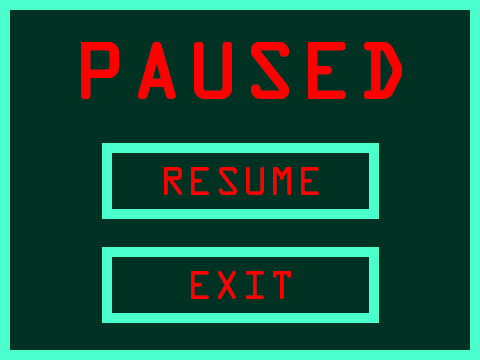
<style>
.page{position:relative;width:480px;height:360px;background:#003223}
.page>*{position:absolute;margin:0}
.t1{font:72px "OCRAStd";letter-spacing:0.04em;color:#ff0000;font-weight:bold}
.t2{font:36px "OCRAStd";letter-spacing:0.04em;color:#ff0000}
</style>
<div class="page">
<p class="t1" style="left:81px;top:42px;width:321px;height:57px">PAUSED</p>
<p class="t2" style="left:164px;top:167px;width:155px;height:28px">RESUME</p>
<p class="t2" style="left:191px;top:271px;width:100px;height:28px">EXIT</p>
</div>
